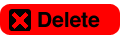
<style>
.page{position:relative;width:120px;height:40px;background:#ff0000}
.page>*{position:absolute;margin:0}
.t1{font:20.8px "Helvetica-Bold";color:#000000}
</style>
<div class="page">
<p class="t1" style="left:38px;top:12px;width:62px;height:16px">Delete</p>
</div>
